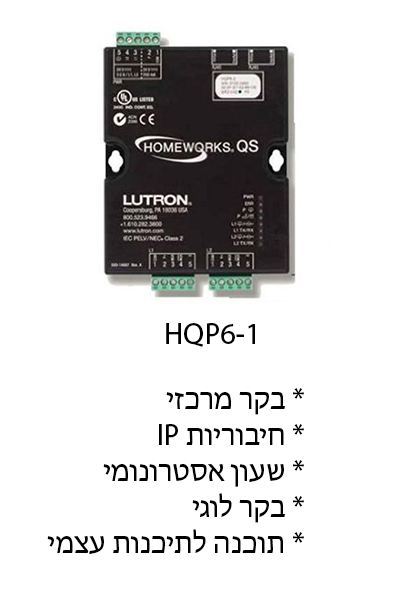
<style>
.page{position:relative;width:400px;height:600px;background:#ffffff}
.page>*{position:absolute;margin:0}
.t1{font:30px "MyriadHebrew-Regular";color:#000000}
</style>
<div class="page">
<p class="t1" style="left:166px;top:323px;width:89px;height:24px">HQP6-1</p>
<p class="t1" style="left:47px;top:388px;width:257px;height:167px;text-align:right">בקר מרכזי *<br>IP חיבוריות *<br> שעון אסטרונומי *<br>בקר לוגי *<br>תוכנה לתיכנות עצמי *</p>
</div>
